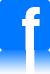
<style>
.page{position:relative;width:50px;height:74px;background:#0078ff}
.page>*{position:absolute;margin:0}
.t1{font:63px "FranklinGothic-DemiCond";letter-spacing:0.1em;color:#ffffff}
</style>
<div class="page">
<p class="t1" style="left:22px;top:7px;width:18px;height:43px">f</p>
</div>
